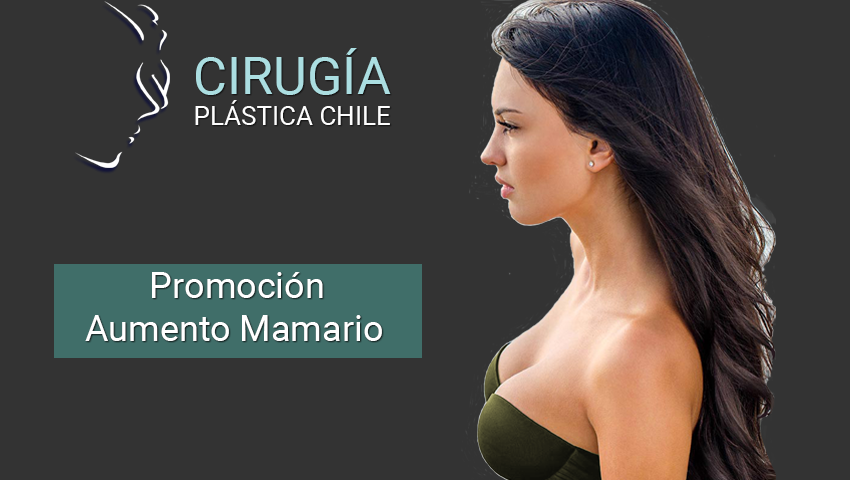
<style>
.page{position:relative;width:850px;height:480px;background:#333333}
.page>*{position:absolute;margin:0}
.t1{font:26px "Roboto-Regular";color:#fdfdfd}
.t2{font:52px "Roboto-Regular";color:#abdee1}
.t3{font:36px "Roboto-Regular";color:#ffffff}
</style>
<div class="page">
<p class="t1" style="left:195px;top:48px;width:196px;height:77px;text-align:center"><span class="t2">CIRUGÍA<br></span>PLÁSTICA CHILE</p>
<p class="t3" style="left:85px;top:272px;width:297px;height:69px;text-align:center">Promoción<br>Aumento Mamario</p>
</div>
